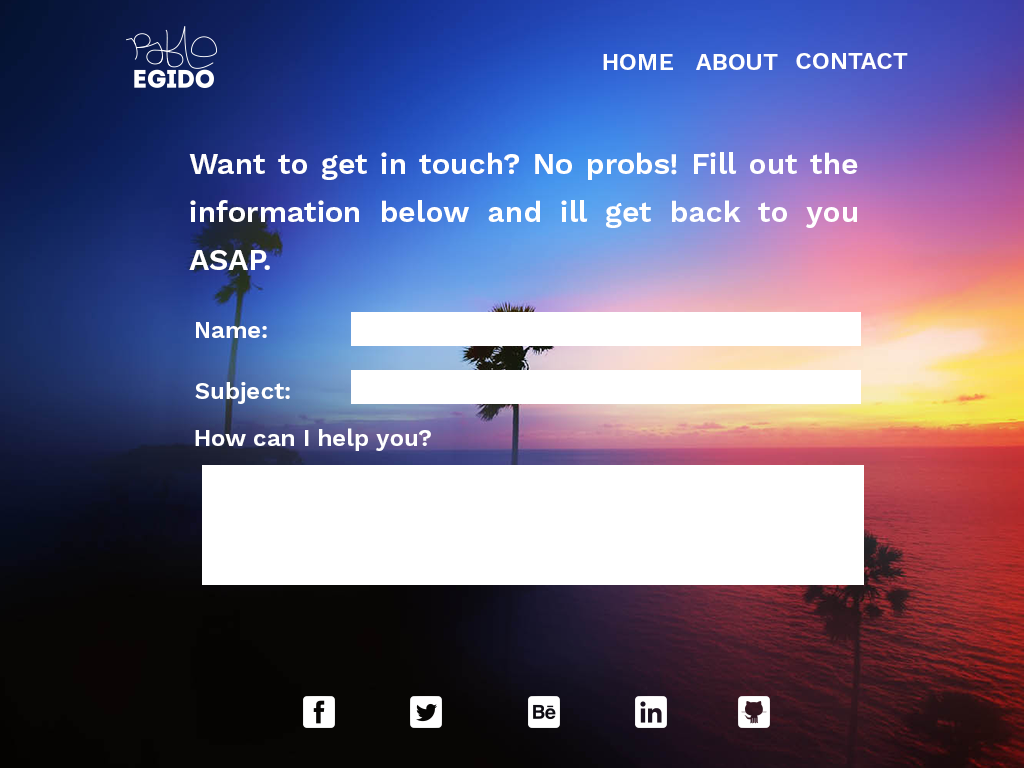
<style>
.page{position:relative;width:1024px;height:768px}
.page>*{position:absolute;margin:0}
.t1{font:24px "WorkSans-SemiBold";color:#ffffff}
.t2{font:30px/48px "WorkSans-SemiBold";color:#ffffff}
</style>
<div class="page">
<p class="t1" style="left:603px;top:54px;width:70px;height:16px">HOME</p>
<p class="t1" style="left:696px;top:54px;width:82px;height:16px">ABOUT</p>
<p class="t1" style="left:796px;top:53px;width:112px;height:16px">CONTACT</p>
<p class="t2" style="left:189px;top:152px;width:669px;height:118px;text-align:justify">Want to get in touch? No probs! Fill out the information below and ill get back to you ASAP.</p>
<p class="t1" style="left:196px;top:322px;width:71px;height:16px">Name:</p>
<p class="t1" style="left:195px;top:382px;width:95px;height:22px">Subject:</p>
<p class="t1" style="left:195px;top:428px;width:236px;height:23px">How can I help you?</p>
</div>
